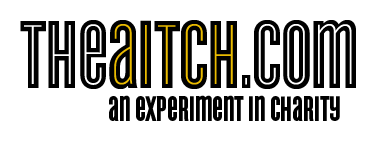
<style>
.page{position:relative;width:376px;height:141px;background:#ffffff}
.page>*{position:absolute;margin:0}
.t1{font:100.7px "CycloneLayers-Background";color:#000000}
.t2{font:37px "CycloneLayers-Background";color:#000000}
</style>
<div class="page">
<p class="t1" style="left:20px;top:20px;width:336px;height:69px">theaitch.com</p>
<p class="t2" style="left:109px;top:95px;width:231px;height:26px">an experiment in charity</p>
</div>
